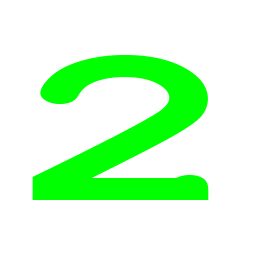
<style>
.page{position:relative;width:256px;height:256px;background:#ffffff}
.page>*{position:absolute;margin:0}
.t1{font:222.5px "CourierNewPS-BoldMT";color:#00ff00;scale:1.73 1}
</style>
<div class="page">
<p class="t1" style="left:32px;top:55px;width:177px;height:145px">2</p>
</div>
